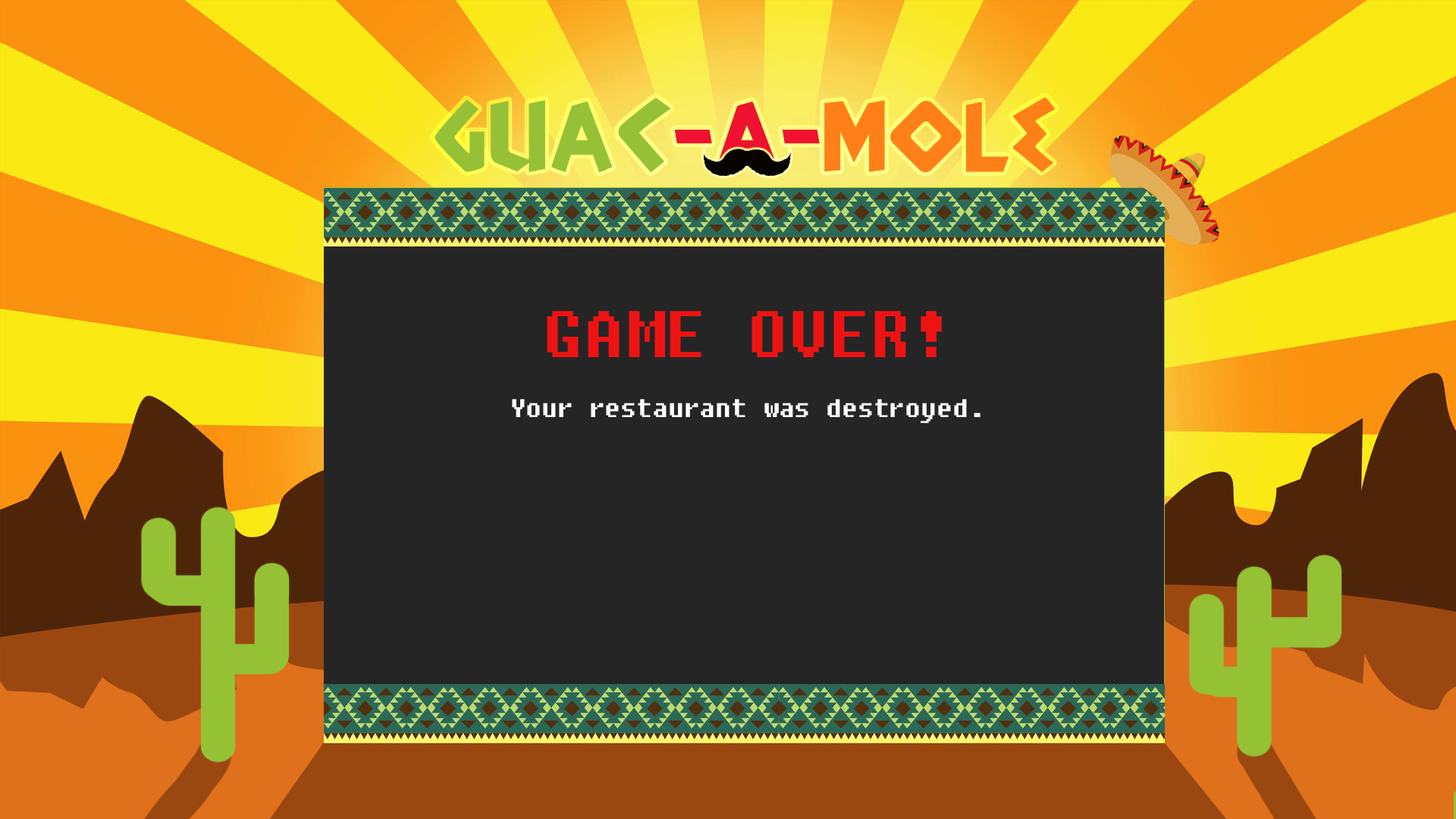
<style>
.page{position:relative;width:1456px;height:819px;background:#252525}
.page>*{position:absolute;margin:0}
.t1{font:23.6px "Fixedsys";color:#ee1313}
.t2{font:9.1px "Fixedsys";color:#ffffff}
</style>
<div class="page">
<p class="t1" style="left:547px;top:311px;width:395px;height:46px">GAME OVER!</p>
<p class="t2" style="left:512px;top:399px;width:469px;height:24px">Your restaurant was destroyed.</p>
</div>
